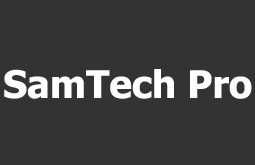
<style>
.page{position:relative;width:255px;height:165px;background:#333333}
.page>*{position:absolute;margin:0}
.t1{font:38px "Tahoma-Bold";color:#ffffff}
</style>
<div class="page">
<p class="t1" style="left:4px;top:69px;width:248px;height:30px">SamTech Pro</p>
</div>
